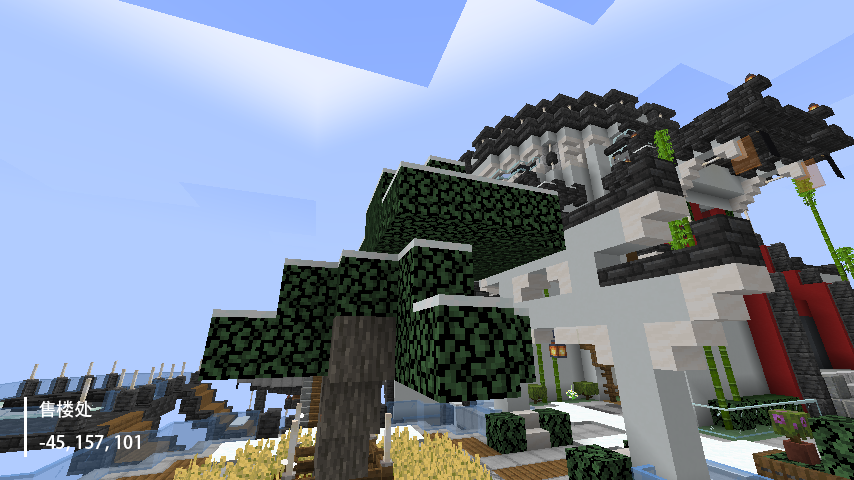
<style>
.page{position:relative;width:854px;height:480px}
.page>*{position:absolute;margin:0}
.t1{font:18px "AdobeHeitiStd-Regular";color:#ffffff}
</style>
<div class="page">
<p class="t1" style="left:39px;top:400px;width:53px;height:18px">售楼处</p>
<p class="t1" style="left:39px;top:435px;width:101px;height:17px">-45, 157, 101</p>
</div>
